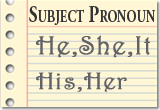
<style>
.page{position:relative;width:160px;height:110px;background:#fff6d5}
.page>*{position:absolute;margin:0}
.t1{font:24px "AGaramondPro-Bold";color:#333334;font-variant:small-caps;scale:0.75 1}
.t2{font:26px "Harrington";letter-spacing:0.05em;color:#616265;font-weight:bold}
.t3{font:24px "Harrington";letter-spacing:0.05em;color:#616265;font-weight:bold}
</style>
<div class="page">
<p class="t1" style="left:29px;top:6px;width:127px;height:19px">Subject Pronoun</p>
<p class="t2" style="left:36px;top:35px;width:114px;height:23px">He,She,It</p>
<p class="t3" style="left:36px;top:72px;width:91px;height:20px">His,Her</p>
</div>
